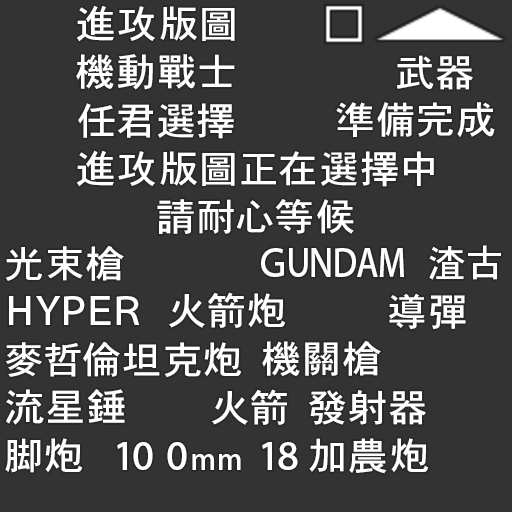
<style>
.page{position:relative;width:512px;height:512px;background:#333333}
.page>*{position:absolute;margin:0}
.t1{font:38px "HeiseiKakuGoStd-W5";letter-spacing:0.06em;color:#ffffff;scale:1.04 1}
.t2{font:38px "HeiseiKakuGoStd-W5";letter-spacing:0.04em;color:#ffffff}
.t3{font:42px "HeiseiKakuGoStd-W5";color:#ffffff;scale:0.8 1}
.t4{font:42px "HeiseiKakuGoStd-W5";letter-spacing:0.06em;color:#ffffff;scale:0.9 1}
.t5{font:38px "HeiseiKakuGoStd-W5";letter-spacing:0.04em;color:#ffffff;scale:1.04 1}
.t6{font:41.8px "HeiseiKakuGoStd-W5";color:#ffffff;scale:0.95 1}
.t7{font:30.4px "HeiseiKakuGoStd-W5";letter-spacing:0.06em;color:#ffffff}
.t8{font:41.8px "HeiseiKakuGoStd-W5";letter-spacing:0.06em;color:#ffffff;scale:0.95 1}
</style>
<div class="page">
<p class="t1" style="left:76px;top:5px;width:159px;height:37px">進攻版圖</p>
<p class="t1" style="left:76px;top:54px;width:159px;height:36px">機動戰士</p>
<p class="t1" style="left:396px;top:55px;width:77px;height:35px">武器</p>
<p class="t1" style="left:336px;top:102px;width:159px;height:36px">準備完成</p>
<p class="t1" style="left:78px;top:103px;width:156px;height:36px">任君選擇</p>
<p class="t1" style="left:76px;top:150px;width:358px;height:37px">進攻版圖正在選擇中</p>
<p class="t1" style="left:157px;top:199px;width:197px;height:35px">請耐心等候</p>
<p class="t1" style="left:5px;top:245px;width:119px;height:36px">光束槍</p>
<p class="t2" style="left:429px;top:245px;width:72px;height:35px">渣古</p>
<p class="t3" style="left:261px;top:248px;width:143px;height:29px">GUNDAM</p>
<p class="t1" style="left:168px;top:292px;width:118px;height:36px">火箭炮</p>
<p class="t1" style="left:389px;top:293px;width:77px;height:37px">導彈</p>
<p class="t4" style="left:9px;top:296px;width:131px;height:29px">HYPER</p>
<p class="t5" style="left:5px;top:341px;width:237px;height:37px">麥哲倫坦克炮</p>
<p class="t1" style="left:262px;top:340px;width:119px;height:36px">機關槍</p>
<p class="t1" style="left:6px;top:389px;width:119px;height:36px">流星錘</p>
<p class="t1" style="left:211px;top:389px;width:76px;height:36px">火箭</p>
<p class="t1" style="left:309px;top:390px;width:117px;height:35px">發射器</p>
<p class="t1" style="left:5px;top:438px;width:78px;height:35px">脚炮</p>
<p class="t1" style="left:309px;top:438px;width:120px;height:36px">加農炮</p>
<p class="t6" style="left:117px;top:442px;width:36px;height:28px">10</p>
<p class="t7" style="left:167px;top:442px;width:74px;height:28px"><span class="t8">0</span>mm</p>
<p class="t6" style="left:262px;top:442px;width:36px;height:28px">18</p>
</div>
